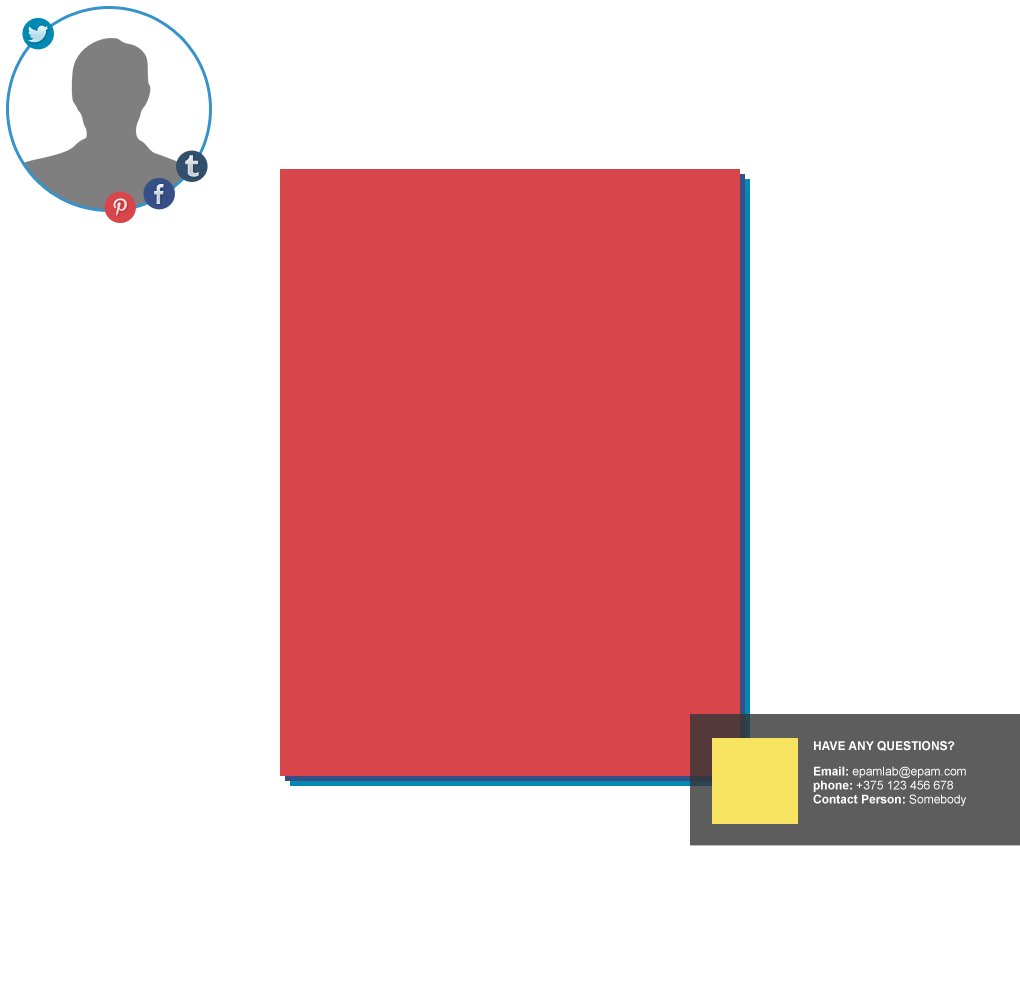
<style>
.page{position:relative;width:1020px;height:1000px;background:#ffffff}
.page>*{position:absolute;margin:0}
.t1{font:12px "Arial-BoldMT";color:#ffffff;text-transform:uppercase}
.t2{font:12px/14px "ArialMT";color:#ffffff}
.t3{font:12px/14px "Arial-BoldMT";color:#ffffff}
</style>
<div class="page">
<p class="t1" style="left:814px;top:741px;width:141px;height:10px">Have any questions?</p>
<p class="t2" style="left:813px;top:766px;width:153px;height:40px"><span class="t3">Email: </span>epamlab@epam.com<br><span class="t3">phone: </span>+375 123 456 678<br><span class="t3">Contact Person: </span>Somebody</p>
</div>
